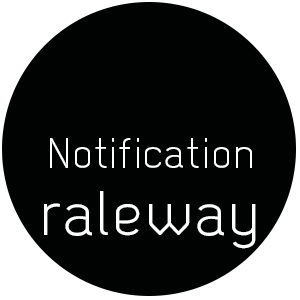
<style>
.page{position:relative;width:300px;height:300px;background:#010202}
.page>*{position:absolute;margin:0}
.t1{font:41.6px "Dekar";letter-spacing:0.06em;color:#ffffff}
.t2{font:62.5px "Dekar";letter-spacing:0.06em;color:#ffffff}
</style>
<div class="page">
<p class="t1" style="left:50px;top:138px;width:202px;height:30px">Notification</p>
<p class="t2" style="left:44px;top:191px;width:212px;height:58px">raleway</p>
</div>
